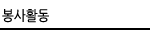
<style>
.page{position:relative;width:150px;height:30px;background:#ffffff}
.page>*{position:absolute;margin:0}
.t1{font:14px "NanumGothic";color:#000000;scale:0.9 1}
</style>
<div class="page">
<p class="t1" style="left:2px;top:9px;width:47px;height:14px">봉사활동</p>
</div>
